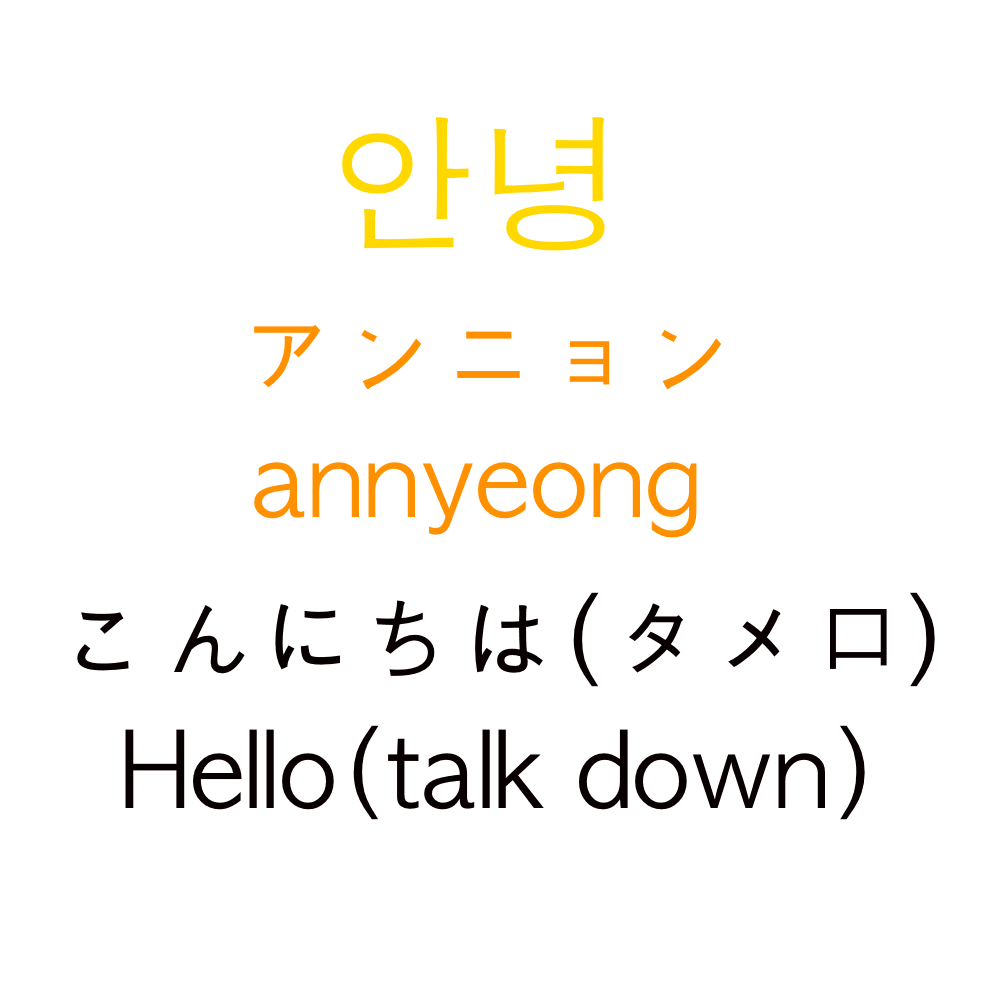
<style>
.page{position:relative;width:1000px;height:1000px;background:#ffffff}
.page>*{position:absolute;margin:0}
.t1{font:150px "AppleGothic";color:#ffd800}
.t2{font:100px "AppleGothic";color:#ff9000}
.t3{font:100px "AppleGothic";color:#080000}
</style>
<div class="page">
<p class="t1" style="left:342px;top:117px;width:263px;height:134px">안녕</p>
<p class="t2" style="left:254px;top:325px;width:467px;height:65px"><span class="t1"><br></span>アンニョン</p>
<p class="t2" style="left:254px;top:462px;width:443px;height:76px">annyeong</p>
<p class="t3" style="left:77px;top:592px;width:858px;height:95px">こんにちは(タメ口）</p>
<p class="t3" style="left:125px;top:725px;width:740px;height:95px">Hello(talk down)</p>
</div>
